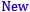
<style>
.page{position:relative;width:30px;height:12px;background:#ffffff}
.page>*{position:absolute;margin:0}
.t1{font:13.9px "Cambria";color:#3000bb}
</style>
<div class="page">
<p class="t1" style="left:2px;top:1px;width:27px;height:10px">New</p>
</div>
